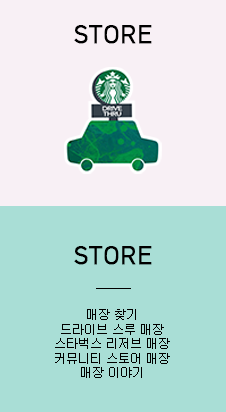
<style>
.page{position:relative;width:226px;height:412px;background:#a9ded6}
.page>*{position:absolute;margin:0}
.t1{font:24px "HCRDotum";color:#000000;font-weight:bold}
.t2{font:12px "New-Gulim";color:#000000}
.t3{font:12px/120px "New-Gulim";color:#000000}
</style>
<div class="page">
<p class="t1" style="left:74px;top:25px;width:78px;height:19px">STORE</p>
<p class="t1" style="left:74px;top:246px;width:78px;height:19px">STORE</p>
<p class="t2" style="left:55px;top:309px;width:115px;height:69px;text-align:center"><span class="t3">매장 찾기<br></span>드라이브 스루 매장<br>스타벅스 리저브 매장<br>커뮤니티 스토어 매장<br>매장 이야기</p>
</div>
